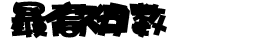
<style>
.page{position:relative;width:256px;height:40px;background:#ffffff}
.page>*{position:absolute;margin:0}
.t1{font:40px "DFPHaiBaoW12";color:#000000}
</style>
<div class="page">
<p class="t1" style="left:11px;top:1px;width:156px;height:38px">最高分数</p>
</div>
